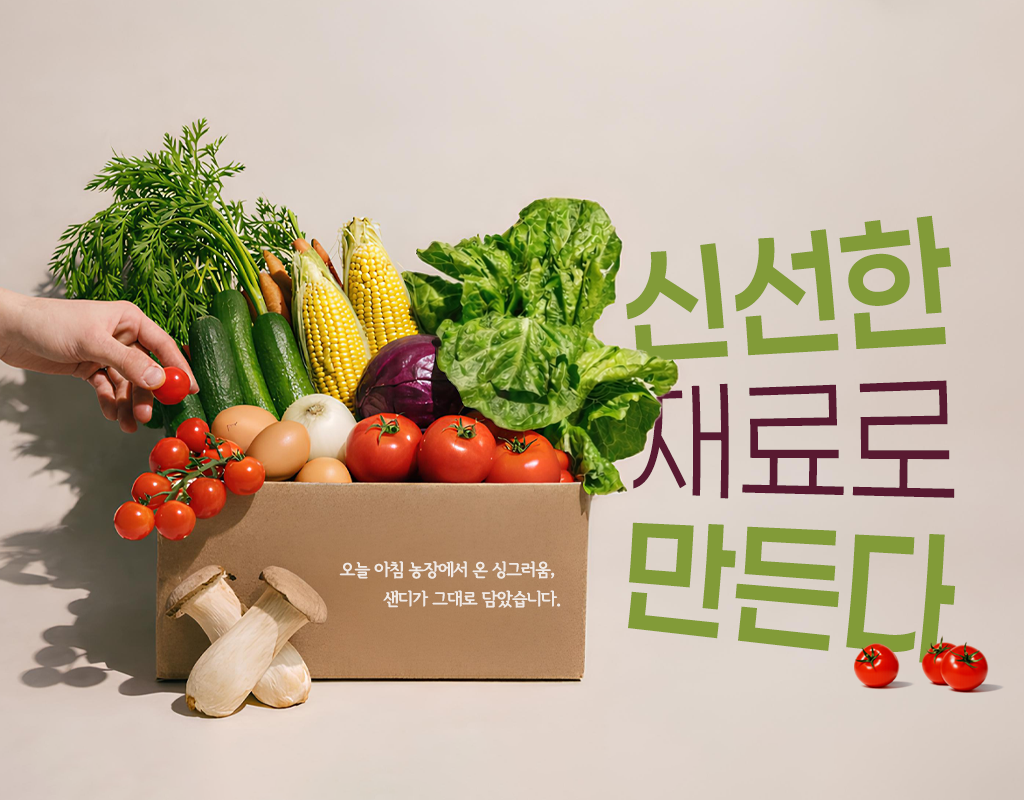
<style>
.page{position:relative;width:1024px;height:800px}
.page>*{position:absolute;margin:0}
.t1{font:125.7px/132.2px "Paperlogy-6SemiBold";color:#829b38}
.t2{font:125.7px/132.2px "Paperlogy-3Light";color:#591a31}
.t3{font:17.8px/29.2px "SeoulHangangEB";letter-spacing:-0.06em;color:#f0e9e4}
</style>
<div class="page">
<p class="t1" style="left:626px;top:215px;width:330px;height:449px">신선한<br><span class="t2">재료로<br></span>만든다</p>
<p class="t3" style="left:339px;top:561px;width:222px;height:47px;text-align:right">오늘 아침 농장에서 온 싱그러움, <br>샌디가 그대로 담았습니다.</p>
</div>
